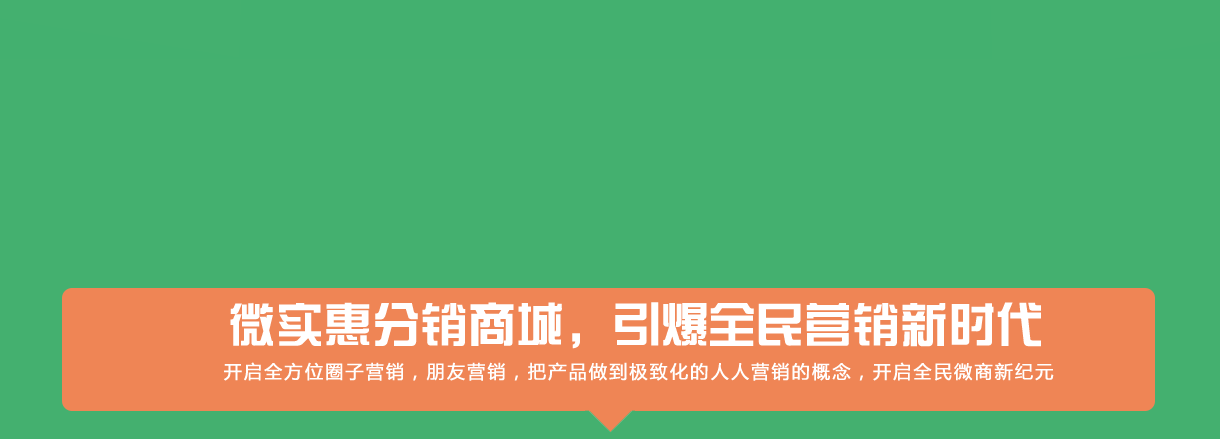
<style>
.page{position:relative;width:1220px;height:439px;background:#44b06f}
.page>*{position:absolute;margin:0}
.t1{font:48px "FZXZYJW--GB1-0";color:#ffffff}
</style>
<div class="page">
<p class="t1" style="left:230px;top:302px;width:811px;height:47px">微实惠分销商城，引爆全民营销新时代</p>
</div>
